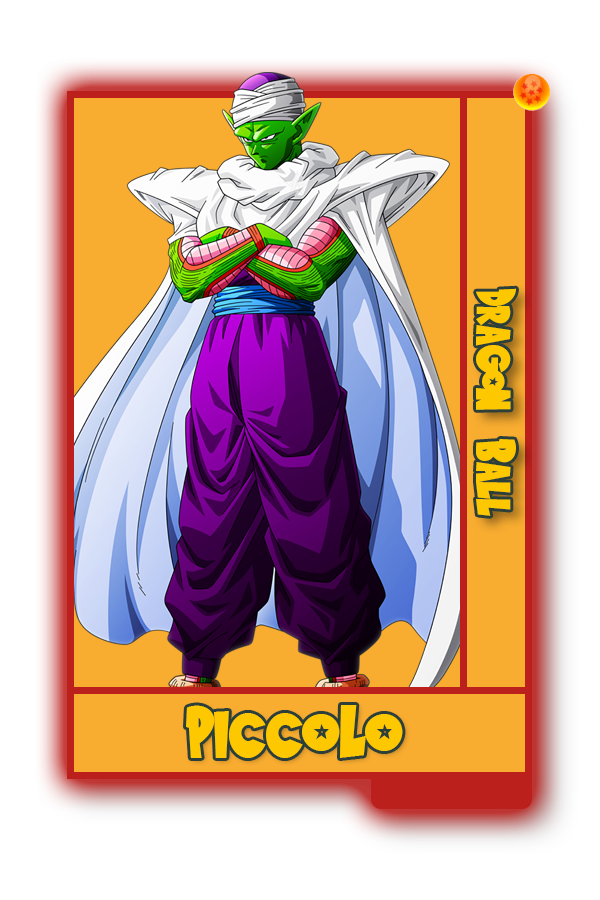
<style>
.page{position:relative;width:600px;height:900px;background:#ffffff}
.page>*{position:absolute;margin:0}
.t1{font:56.9px "SaiyanSans";color:#fec800}
.t2{font:75px "SaiyanSans";color:#fec800}
</style>
<div class="page">
<p class="t1" style="left:476px;top:288px;width:40px;height:228px;rotate:90deg">Dragon Ball</p>
<p class="t2" style="left:186px;top:705px;width:217px;height:53px">PiccOLO</p>
</div>
